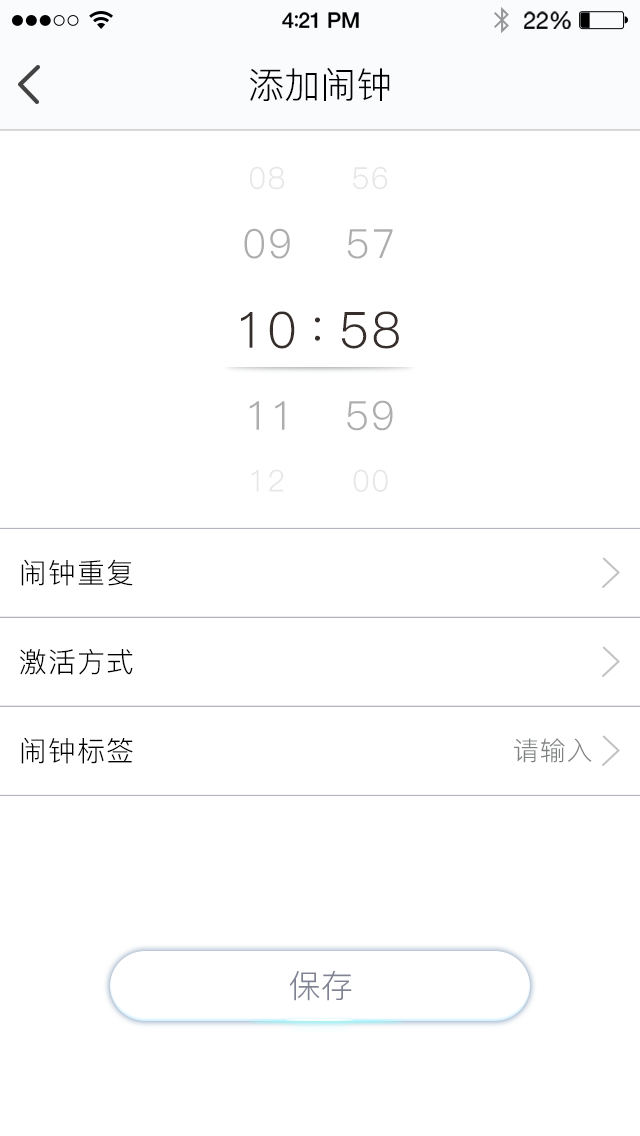
<style>
.page{position:relative;width:640px;height:1136px;background:#ffffff}
.page>*{position:absolute;margin:0}
.t1{font:36px "PingFang-SC-Regular";color:#000000}
.t2{font:30.1px "PingFang-SC-Regular";letter-spacing:0.04em;color:#e6e6e6;text-transform:uppercase}
.t3{font:40.1px "PingFang-SC-Regular";letter-spacing:0.04em;color:#adadad;text-transform:uppercase}
.t4{font:49.9px "PingFang-SC-Regular";letter-spacing:0.04em;color:#362e2b;text-transform:uppercase}
.t5{font:40px "PingFang-SC-Regular";letter-spacing:0.04em;color:#adadad;text-transform:uppercase}
.t6{font:30px "PingFang-SC-Regular";letter-spacing:0.04em;color:#e6e6e6;text-transform:uppercase}
.t7{font:28px "PingFang-SC-Regular";letter-spacing:0.04em;color:#000000}
.t8{font:26px "PingFang-SC-Regular";letter-spacing:0.04em;color:#808282}
.t9{font:32px "PingFang-SC-Regular";color:#7f8393}
</style>
<div class="page">
<p class="t1" style="left:250px;top:68px;width:140px;height:33px">添加闹钟</p>
<p class="t2" style="left:250px;top:166px;width:34px;height:24px">08</p>
<p class="t2" style="left:353px;top:166px;width:34px;height:24px">56</p>
<p class="t3" style="left:244px;top:228px;width:46px;height:31px">09</p>
<p class="t3" style="left:347px;top:229px;width:46px;height:30px">57</p>
<p class="t4" style="left:241px;top:311px;width:54px;height:38px">10</p>
<p class="t4" style="left:315px;top:317px;width:5px;height:24px">:</p>
<p class="t4" style="left:341px;top:311px;width:58px;height:38px">58</p>
<p class="t5" style="left:249px;top:401px;width:36px;height:29px">11</p>
<p class="t5" style="left:347px;top:400px;width:46px;height:31px">59</p>
<p class="t6" style="left:251px;top:469px;width:33px;height:23px">12</p>
<p class="t6" style="left:353px;top:469px;width:35px;height:23px">00</p>
<p class="t7" style="left:21px;top:559px;width:112px;height:27px">闹钟重复</p>
<p class="t7" style="left:20px;top:649px;width:113px;height:26px">激活方式</p>
<p class="t7" style="left:21px;top:737px;width:112px;height:27px">闹钟标签</p>
<p class="t8" style="left:514px;top:738px;width:78px;height:25px">请输入</p>
<p class="t9" style="left:289px;top:970px;width:63px;height:31px">保存</p>
</div>
